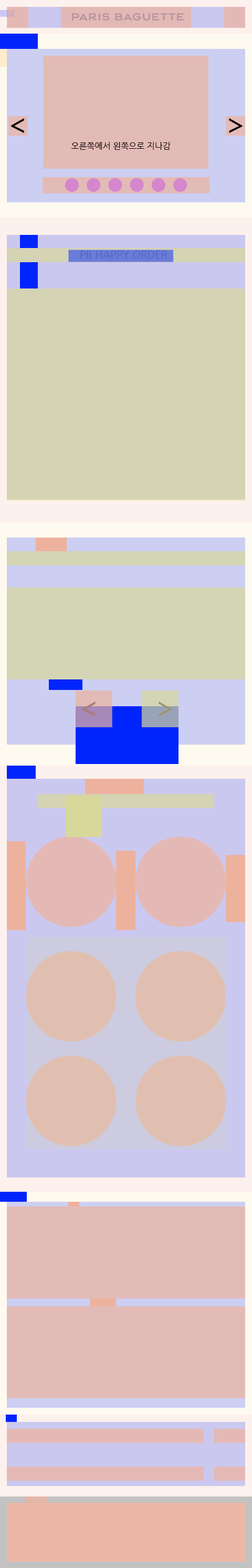
<style>
.page{position:relative;width:252px;height:1568px}
.page>*{position:absolute;margin:0}
.t1{font:8.4px "NanumGothic";color:#000000}
.t2{font:10.5px "NanumGothic";color:#5164c0}
</style>
<div class="page">
<p class="t1" style="left:71px;top:142px;width:100px;height:8px">오른쪽에서 왼쪽으로 지나감</p>
<p class="t2" style="left:80px;top:251px;width:88px;height:8px">PB HAPPY ORDER</p>
</div>
